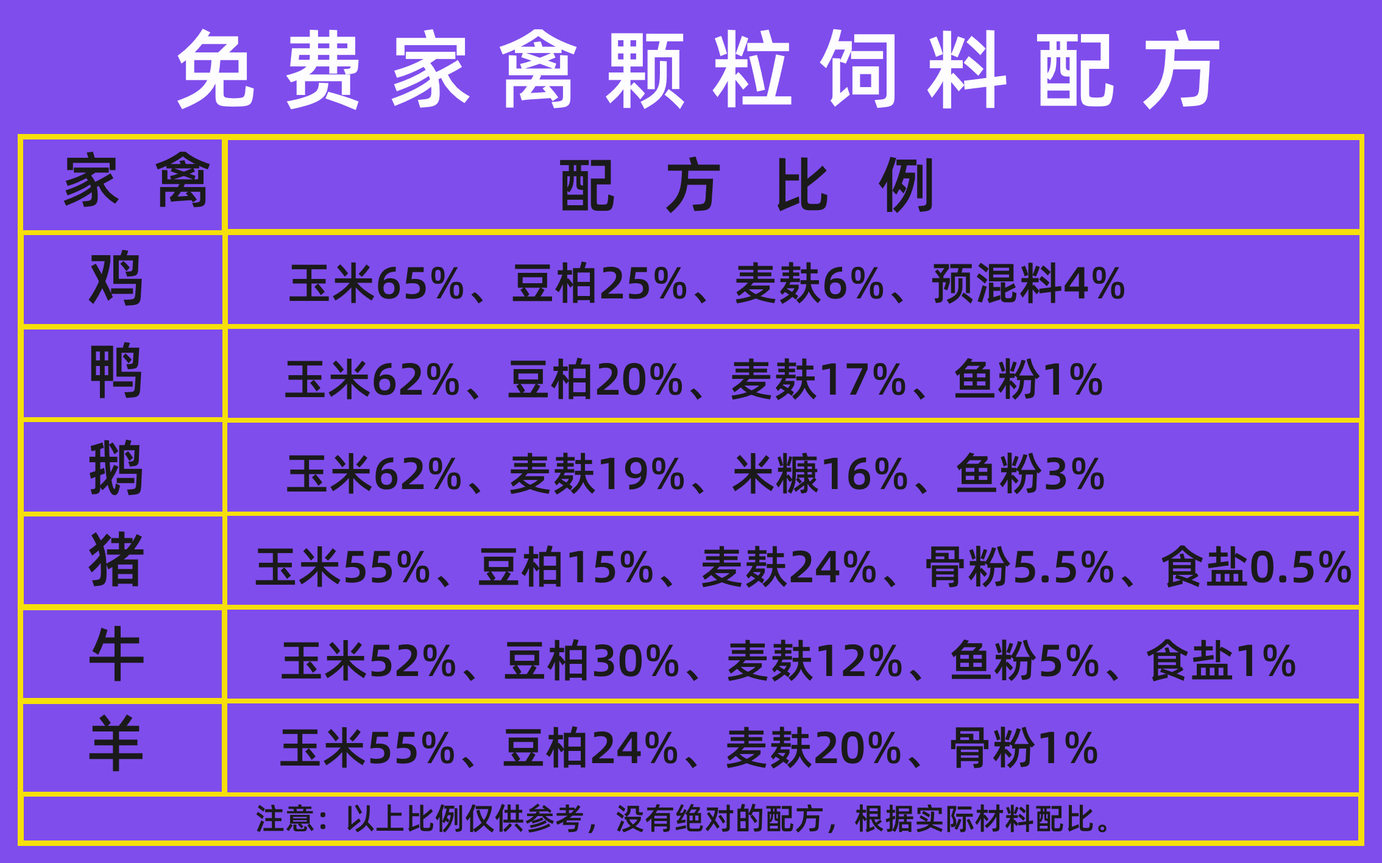
<style>
.page{position:relative;width:1382px;height:863px;background:#7f4dec}
.page>*{position:absolute;margin:0}
.t1{font:86.5px "AlibabaPuHuiTi-Medium";color:#fdfcfe}
.t2{font:60.9px "AlibabaPuHuiTi-Medium";color:#1a1a1a}
.t3{font:45.1px "AlibabaPuHuiTi-Medium";color:#1a1a1a}
.t4{font:30.5px "AlibabaPuHuiTi-Medium";color:#1a1a1a}
</style>
<div class="page">
<p class="t1" style="left:177px;top:29px;width:1042px;height:81px">免 费 家 禽 颗 粒 饲 料 配 方</p>
<p class="t2" style="left:63px;top:152px;width:147px;height:56px">家  禽</p>
<p class="t2" style="left:560px;top:157px;width:372px;height:56px">配   方   比   例</p>
<p class="t2" style="left:88px;top:250px;width:54px;height:56px">鸡</p>
<p class="t3" style="left:289px;top:261px;width:835px;height:43px">玉米65%、豆柏25%、麦麸6%、预混料4%</p>
<p class="t2" style="left:91px;top:342px;width:50px;height:56px">鸭</p>
<p class="t3" style="left:285px;top:358px;width:817px;height:42px">玉米62%、豆柏20%、麦麸17%、鱼粉1%</p>
<p class="t2" style="left:89px;top:439px;width:53px;height:57px">鹅</p>
<p class="t3" style="left:287px;top:452px;width:817px;height:43px">玉米62%、麦麸19%、米糠16%、鱼粉3%</p>
<p class="t2" style="left:88px;top:531px;width:56px;height:56px">猪</p>
<p class="t3" style="left:255px;top:545px;width:1095px;height:43px">玉米55%、豆柏15%、麦麸24%、骨粉5.5%、食盐0.5%</p>
<p class="t2" style="left:89px;top:626px;width:55px;height:56px">牛</p>
<p class="t3" style="left:281px;top:639px;width:1014px;height:43px">玉米52%、豆柏30%、麦麸12%、鱼粉5%、食盐1%</p>
<p class="t2" style="left:89px;top:715px;width:54px;height:57px">羊</p>
<p class="t3" style="left:280px;top:726px;width:817px;height:43px">玉米55%、豆柏24%、麦麸20%、骨粉1%</p>
<p class="t4" style="left:256px;top:803px;width:850px;height:30px">注意：以上比例仅供参考，没有绝对的配方，根据实际材料配比。</p>
</div>
